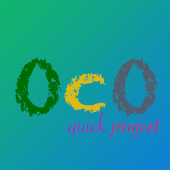
<style>
.page{position:relative;width:170px;height:170px}
.page>*{position:absolute;margin:0}
.t1{font:72px "Chalkduster";color:#006c00}
.t2{font:72px "Chalkduster";color:#dbbc13}
.t3{font:72px "Chalkduster";color:#4f5f6f}
.t4{font:30px "SavoyeLetPlain";color:#c71d75}
.t5{font:30px "SavoyeLetPlain";color:#9d1dc7}
</style>
<div class="page">
<p class="t1" style="left:15px;top:56px;width:144px;height:61px">O<span class="t2">c</span><span class="t3">O</span></p>
<p class="t4" style="left:67px;top:111px;width:93px;height:27px"><span class="t5">quick </span>projcet</p>
</div>
